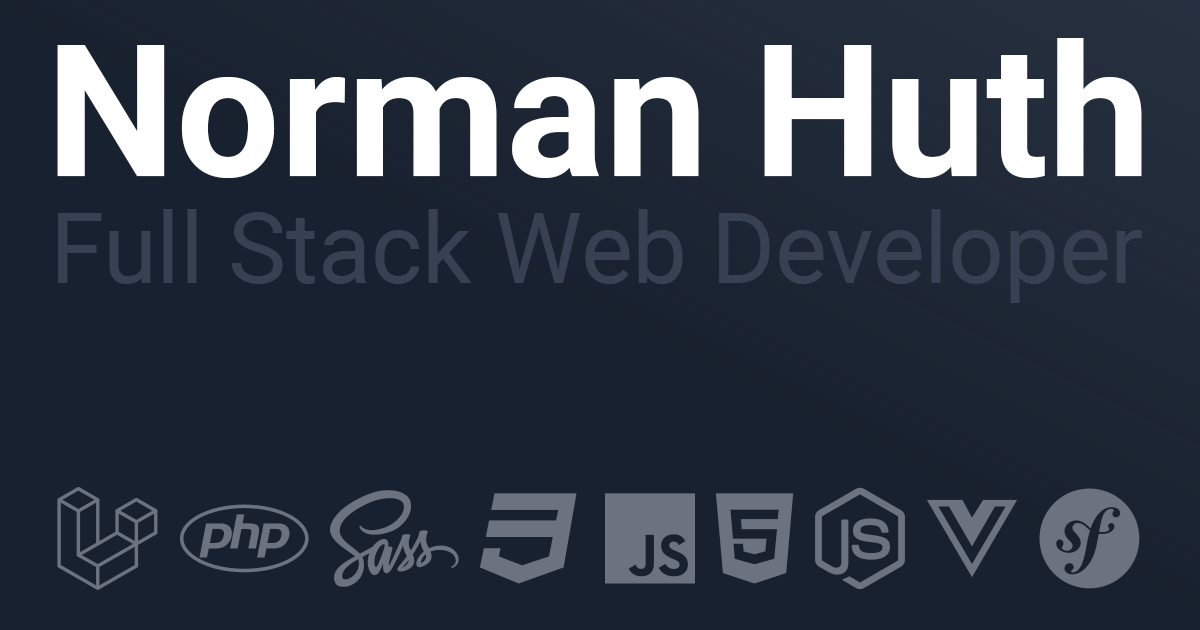
<style>
.page{position:relative;width:1200px;height:630px;background:#18212f}
.page>*{position:absolute;margin:0}
.t1{font:183.8px "Roboto-Bold";color:#ffffff}
.t2{font:97.6px "Roboto-Regular";color:#374151}
</style>
<div class="page">
<p class="t1" style="left:57px;top:38px;width:1085px;height:140px">Norman Huth</p>
<p class="t2" style="left:58px;top:209px;width:1084px;height:94px">Full Stack Web Developer</p>
</div>
